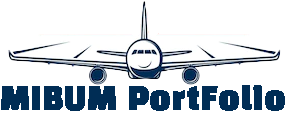
<style>
.page{position:relative;width:289px;height:117px;background:#ffffff}
.page>*{position:absolute;margin:0}
.t1{font:30px "BlackHanSans-Regular";color:#002d55;font-weight:bold}
</style>
<div class="page">
<p class="t1" style="left:1px;top:85px;width:284px;height:26px">MIBUM PortFolio</p>
</div>
